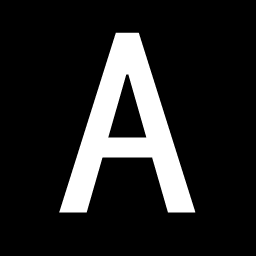
<style>
.page{position:relative;width:256px;height:256px;background:#000000}
.page>*{position:absolute;margin:0}
.t1{font:265.6px "SimHei";letter-spacing:0.14em;color:#ffffff;scale:1.09 1}
</style>
<div class="page">
<p class="t1" style="left:59px;top:32px;width:137px;height:181px">A</p>
</div>
